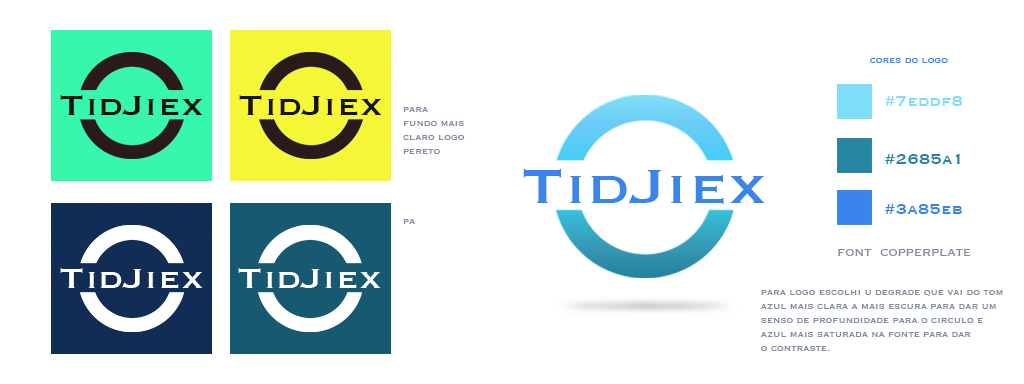
<style>
.page{position:relative;width:1024px;height:384px;background:#ffffff}
.page>*{position:absolute;margin:0}
.t1{font:11px "Copperplate";color:#3a85eb}
.t2{font:36.4px "Copperplate";color:#161313;scale:1.13 1}
.t3{font:19.1px "Copperplate";color:#7eddf8}
.t4{font:11px/14px "Copperplate";color:#838fa0}
.t5{font:19.1px "Copperplate";color:#2685a1}
.t6{font:62.3px "Copperplate";color:#3a85eb;scale:1.13 1}
.t7{font:19.1px "Copperplate";color:#3a85eb}
.t8{font:15.3px "Copperplate";color:#838fa0;scale:0.96 1}
</style>
<div class="page">
<p class="t1" style="left:870px;top:58px;width:78px;height:5px">cores do logo</p>
<p class="t2" style="left:60px;top:95px;width:143px;height:20px">TidJiex</p>
<p class="t2" style="left:239px;top:95px;width:143px;height:20px">TidJiex</p>
<p class="t3" style="left:885px;top:96px;width:78px;height:10px">#7eddf8</p>
<p class="t4" style="left:403px;top:107px;width:62px;height:117px">para <br>fundo mais <br>claro logo <br>pereto<br><br><br><br><br>pa</p>
<p class="t5" style="left:885px;top:154px;width:75px;height:10px">#2685a1</p>
<p class="t6" style="left:523px;top:169px;width:242px;height:35px">TidJiex</p>
<p class="t7" style="left:885px;top:204px;width:77px;height:10px">#3a85eb</p>
<p class="t8" style="left:838px;top:249px;width:133px;height:7px">font  copperplate</p>
<p class="t4" style="left:760px;top:290px;width:243px;height:61px">para logo escolhi u degrade que vai do tom<br>azul mais clara a mais escura para dar um <br>senso de profundidade para o circulo e <br>azul mais saturada na fonte para dar <br>o contraste.</p>
</div>
